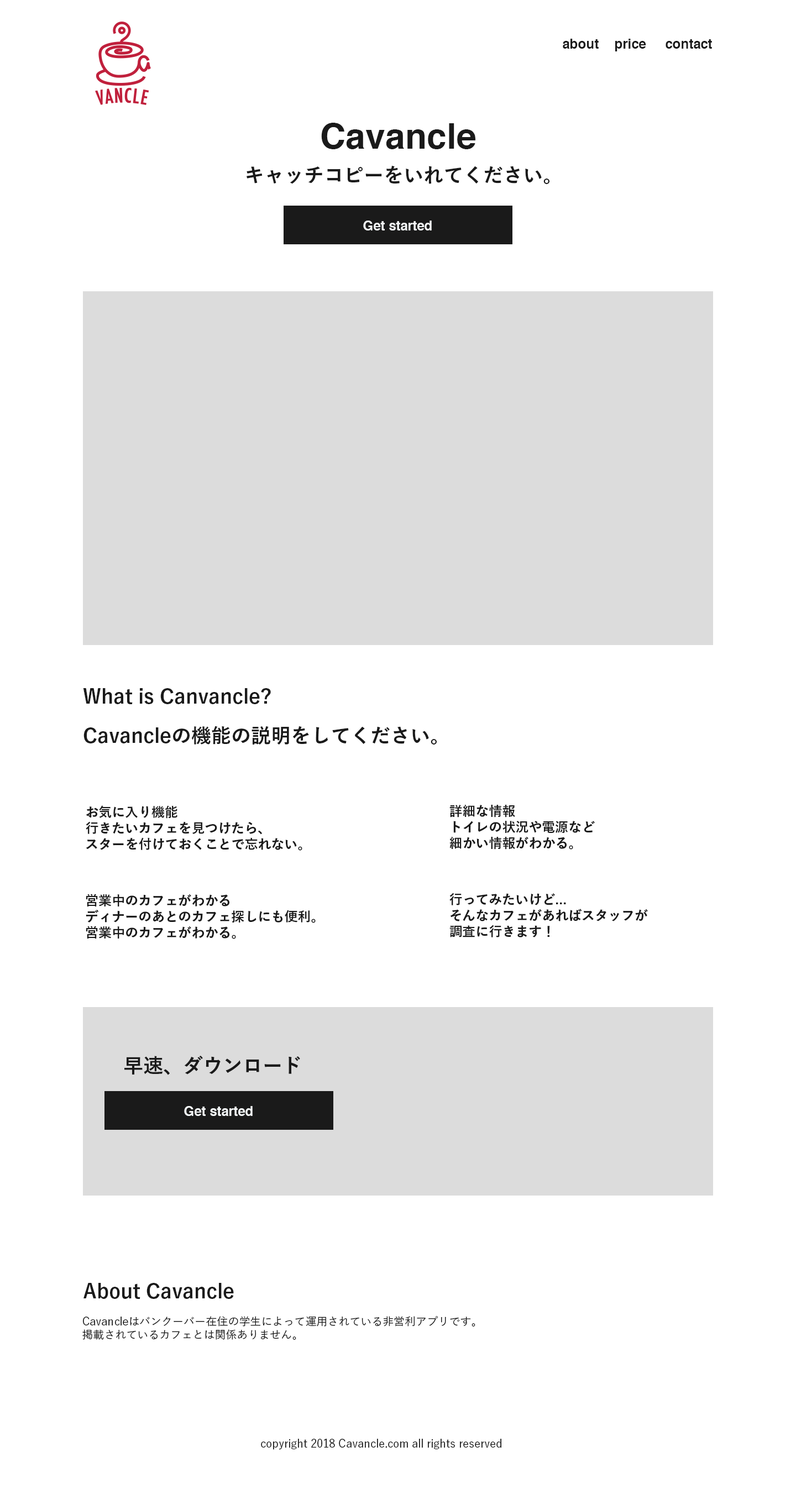
<style>
.page{position:relative;width:796px;height:1499px;background:#ffffff}
.page>*{position:absolute;margin:0}
.t1{font:13.3px "Helvetica-Bold";color:#1a1a1a}
.t2{font:35.4px "Helvetica-Bold";color:#1a1a1a}
.t3{font:19.9px "YuGo-Bold";color:#1a1a1a}
.t4{font:13.3px "Helvetica-Bold";color:#f4f7f8}
.t5{font:13.3px "YuGo-Bold";color:#1a1a1a}
.t6{font:11.1px "YuGo-Medium";color:#1a1a1a}
</style>
<div class="page">
<p class="t1" style="left:563px;top:39px;width:149px;height:12px">about    price     contact</p>
<p class="t2" style="left:321px;top:123px;width:154px;height:26px">Cavancle</p>
<p class="t3" style="left:246px;top:166px;width:303px;height:18px">キャッチコピーをいれてください。</p>
<p class="t4" style="left:363px;top:220px;width:69px;height:10px">Get started</p>
<p class="t3" style="left:83px;top:688px;width:188px;height:17px">What is Canvancle?</p>
<p class="t3" style="left:83px;top:726px;width:354px;height:18px">Cavancleの機能の説明をしてください。</p>
<p class="t5" style="left:86px;top:805px;width:216px;height:45px">お気に入り機能<br>行きたいカフェを見つけたら、<br>スターを付けておくことで忘れない。</p>
<p class="t5" style="left:449px;top:804px;width:146px;height:45px">詳細な情報<br>トイレの状況や電源など<br>細かい情報がわかる。</p>
<p class="t5" style="left:86px;top:894px;width:230px;height:45px">営業中のカフェがわかる<br>ディナーのあとのカフェ探しにも便利。<br>営業中のカフェがわかる。</p>
<p class="t5" style="left:449px;top:892px;width:199px;height:45px">行ってみたいけど...<br>そんなカフェがあればスタッフが<br>調査に行きます！</p>
<p class="t3" style="left:124px;top:1055px;width:176px;height:20px">早速、ダウンロード</p>
<p class="t4" style="left:184px;top:1106px;width:69px;height:10px">Get started</p>
<p class="t3" style="left:83px;top:1283px;width:151px;height:16px">About Cavancle</p>
<p class="t6" style="left:82px;top:1316px;width:393px;height:23px">Cavancleはバンクーバー在住の学生によって運用されている非営利アプリです。<br>掲載されているカフェとは関係ありません。</p>
<p class="t6" style="left:261px;top:1438px;width:240px;height:11px">copyright 2018 Cavancle.com all rights reserved</p>
</div>
